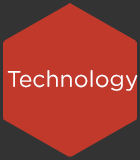
<style>
.page{position:relative;width:140px;height:160px;background:#c0392b}
.page>*{position:absolute;margin:0}
.t1{font:23px "GothamRounded-Book";color:#ffffff}
</style>
<div class="page">
<p class="t1" style="left:7px;top:70px;width:131px;height:21px">Technology</p>
</div>
